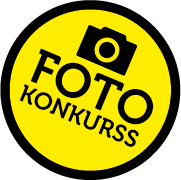
<style>
.page{position:relative;width:181px;height:180px;background:#ffed00}
.page>*{position:absolute;margin:0}
.t1{font:24px/22px "Museo-700";color:#000000}
.t2{font:48px/22px "Museo-700";color:#000000}
</style>
<div class="page">
<p class="t1" style="left:19px;top:48px;width:135px;height:99px;rotate:23deg"><span class="t2">FOTO<br></span>KONKURSS</p>
</div>
